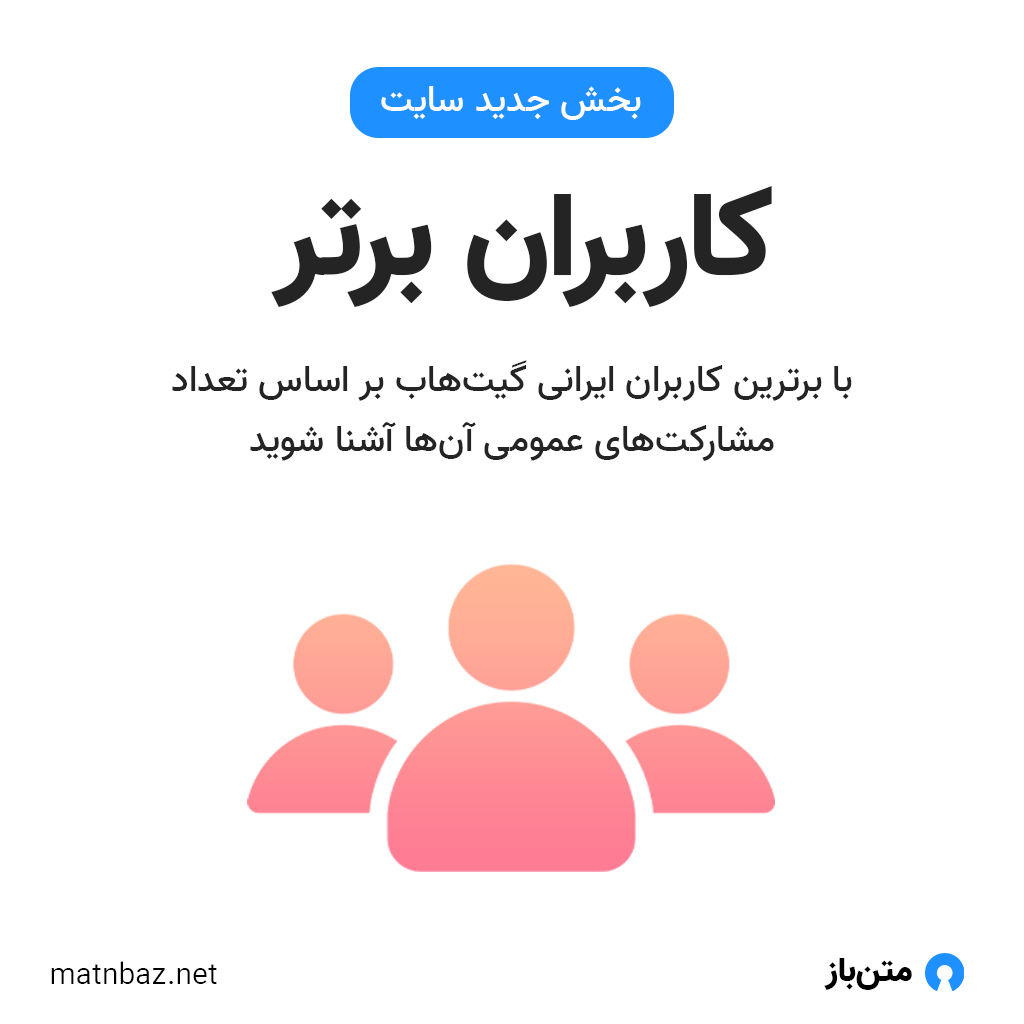
<style>
.page{position:relative;width:1024px;height:1024px;background:#ffffff}
.page>*{position:absolute;margin:0}
.t1{font:37.4px "Vazir-Medium";color:#ffffff}
.t2{font:118.9px "Vazir-Black";color:#242424}
.t3{font:37.4px/59.9px "Vazir-Medium";color:#242424}
.t4{font:30px "Vazir-Light";color:#000000}
.t5{font:34.2px "Vazir-Black";color:#000000}
</style>
<div class="page">
<p class="t1" style="left:381px;top:86px;width:260px;height:34px">بخش جدید سایت</p>
<p class="t2" style="left:271px;top:186px;width:501px;height:122px">کاربران برتر</p>
<p class="t3" style="left:172px;top:360px;width:680px;height:101px;text-align:center">با برترین کاربران ایرانی گیت‌هاب بر اساس تعداد مشارکت‌های عمومی آن‌ها آشنا شوید</p>
<p class="t4" style="left:51px;top:961px;width:166px;height:23px">matnbaz.net</p>
<p class="t5" style="left:824px;top:958px;width:88px;height:32px">متن‌باز</p>
</div>
